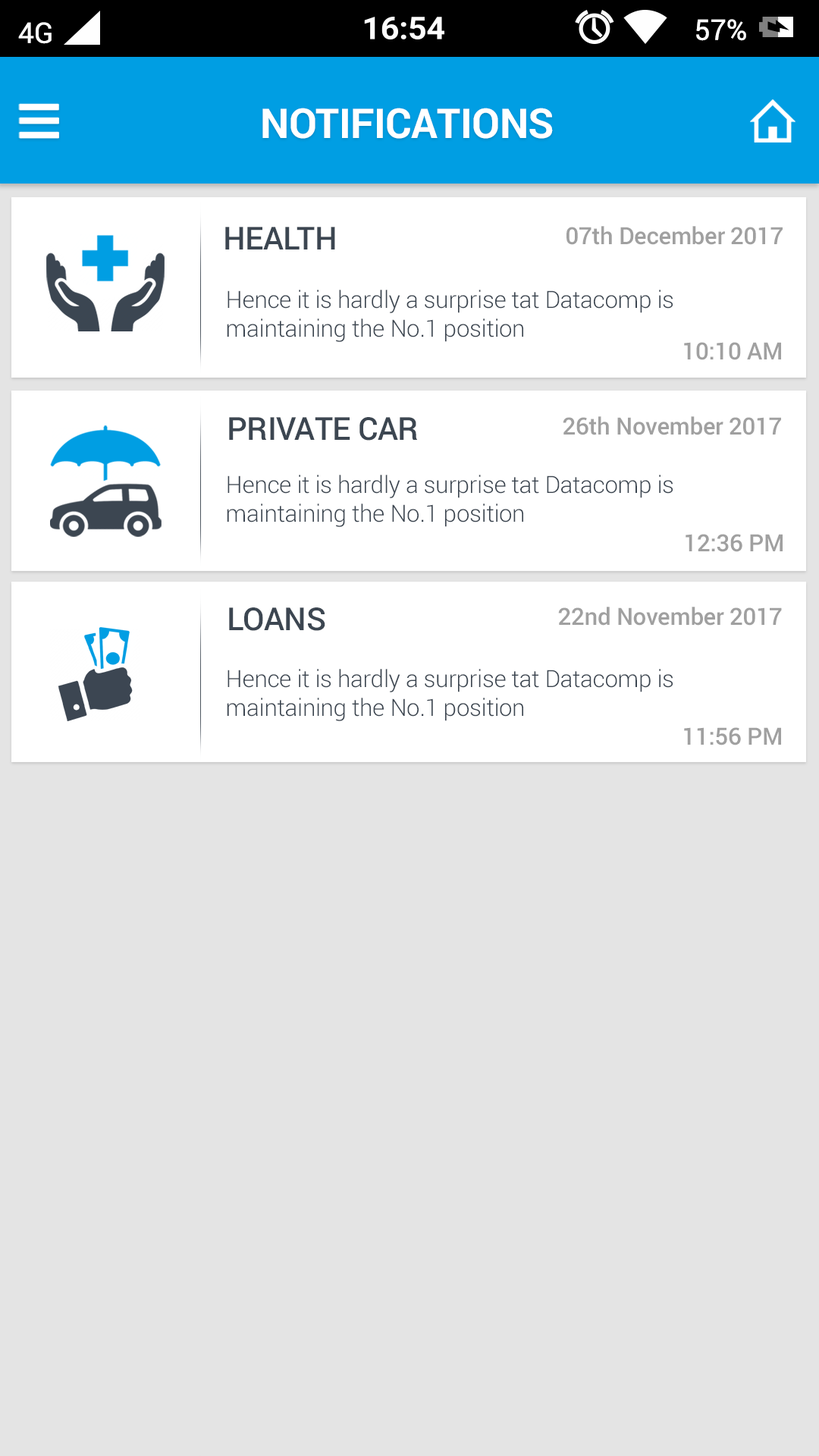
<style>
.page{position:relative;width:819px;height:1456px;background:#e4e4e4}
.page>*{position:absolute;margin:0}
.t1{font:41.1px "Roboto-Bold";letter-spacing:-0.01em;color:#ffffff}
.t2{font:31.6px "Roboto-Medium";letter-spacing:-0.01em;color:#3c4651}
.t3{font:23.7px "Roboto-Medium";letter-spacing:-0.01em;color:#a0a0a0}
.t4{font:23.7px "Roboto-Light";letter-spacing:-0.01em;color:#3c4651}
</style>
<div class="page">
<p class="t1" style="left:262px;top:108px;width:291px;height:31px">NOTIFICATIONS</p>
<p class="t2" style="left:225px;top:227px;width:110px;height:22px">HEALTH</p>
<p class="t3" style="left:566px;top:226px;width:217px;height:19px">07th December 2017</p>
<p class="t4" style="left:227px;top:290px;width:446px;height:52px">Hence it is hardly a surprise tat Datacomp is  maintaining the No.1 position</p>
<p class="t3" style="left:684px;top:342px;width:97px;height:18px">10:10 AM</p>
<p class="t2" style="left:229px;top:417px;width:188px;height:24px">PRIVATE CAR</p>
<p class="t3" style="left:563px;top:416px;width:218px;height:19px">26th November 2017</p>
<p class="t4" style="left:227px;top:475px;width:446px;height:52px">Hence it is hardly a surprise tat Datacomp is  maintaining the No.1 position</p>
<p class="t3" style="left:686px;top:534px;width:97px;height:18px">12:36 PM</p>
<p class="t2" style="left:229px;top:607px;width:96px;height:24px">LOANS</p>
<p class="t3" style="left:558px;top:607px;width:224px;height:19px">22nd November 2017</p>
<p class="t4" style="left:227px;top:669px;width:446px;height:52px">Hence it is hardly a surprise tat Datacomp is  maintaining the No.1 position</p>
<p class="t3" style="left:684px;top:727px;width:97px;height:18px">11:56 PM</p>
</div>
